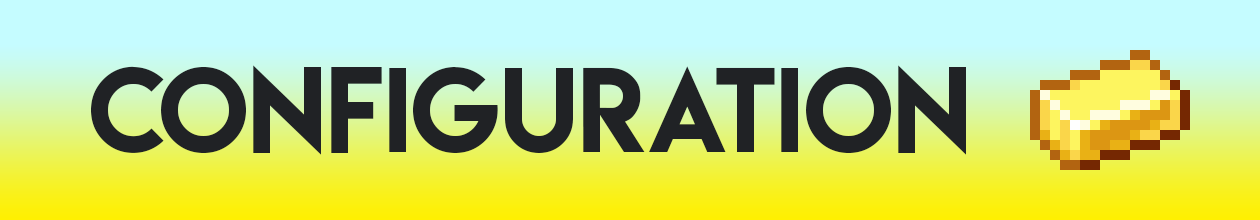
<style>
.page{position:relative;width:1260px;height:220px;background:#c5fcff}
.page>*{position:absolute;margin:0}
.t1{font:106.3px "LemonMilk";color:#202225}
</style>
<div class="page">
<p class="t1" style="left:91px;top:65px;width:875px;height:90px">configuration</p>
</div>
